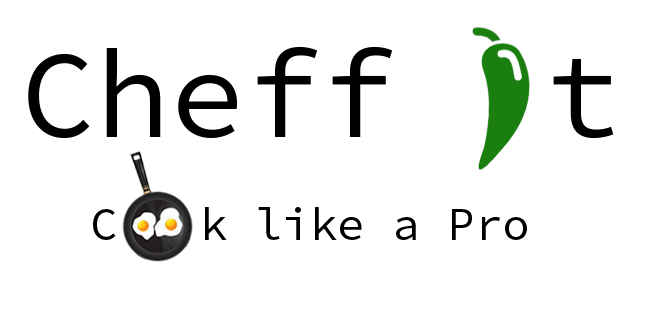
<style>
.page{position:relative;width:655px;height:334px;background:#ffffff}
.page>*{position:absolute;margin:0}
.t1{font:125px "SourceCodePro-Regular";color:#000000}
.t2{font:45.8px "SourceCodePro-Regular";color:#000000}
</style>
<div class="page">
<p class="t1" style="left:28px;top:46px;width:586px;height:93px">Cheff  t</p>
<p class="t2" style="left:93px;top:207px;width:434px;height:33px">C   k like a Pro</p>
</div>
